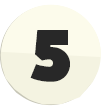
<style>
.page{position:relative;width:101px;height:109px;background:#fcfbeb}
.page>*{position:absolute;margin:0}
.t1{font:72px "MovaviGrotesqueBlack";color:#282828}
</style>
<div class="page">
<p class="t1" style="left:30px;top:30px;width:40px;height:52px">5</p>
</div>
